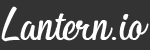
<style>
.page{position:relative;width:150px;height:50px;background:#333333}
.page>*{position:absolute;margin:0}
.t1{font:40.4px "AfternooninStereoPersonalUse-Re";color:#ffffff}
.t2{font:40.4px "TimesNewRomanPSMT";color:#ffffff}
</style>
<div class="page">
<p class="t1" style="left:1px;top:6px;width:148px;height:36px">Lantern<span class="t2">.</span>io</p>
</div>
